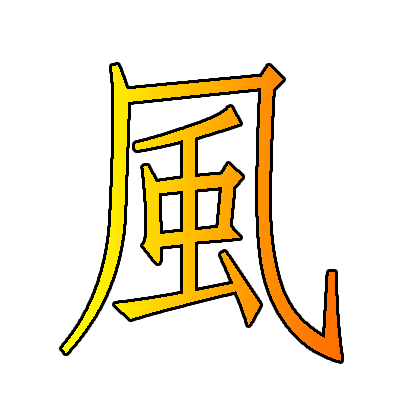
<style>
.page{position:relative;width:400px;height:400px;background:#ffffff}
.page>*{position:absolute;margin:0}
.t1{font:325px "FangSong"}
</style>
<div class="page">
<p class="t1" style="left:62px;top:65px;width:279px;height:296px">風</p>
</div>
